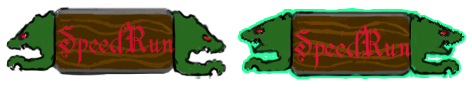
<style>
.page{position:relative;width:472px;height:88px;background:#ffffff}
.page>*{position:absolute;margin:0}
.t1{font:40px "Blackstone_Hand";color:#cc0e2e}
.t2{font:40px "Blackstone_Hand";color:#d71233}
</style>
<div class="page">
<p class="t1" style="left:58px;top:21px;width:117px;height:46px">SpeedRun</p>
<p class="t2" style="left:294px;top:25px;width:118px;height:46px">SpeedRun</p>
</div>
